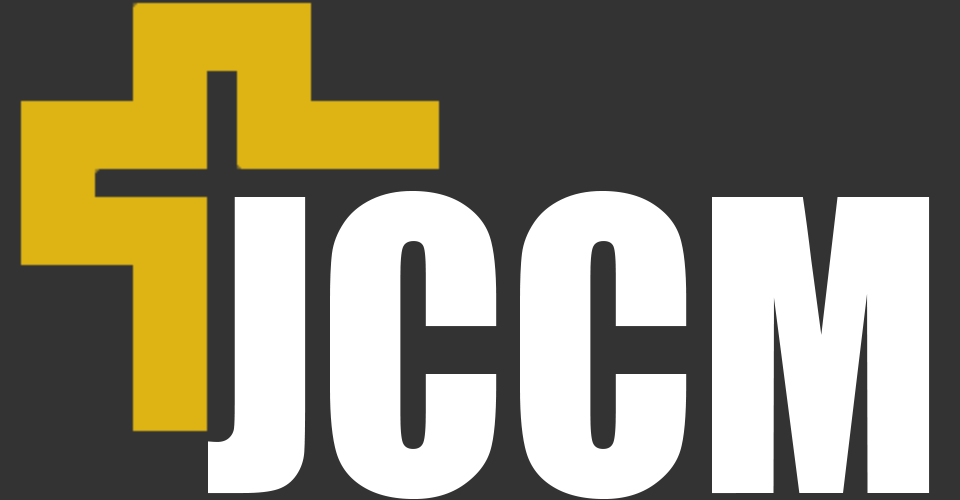
<style>
.page{position:relative;width:960px;height:500px;background:#333333}
.page>*{position:absolute;margin:0}
.t1{font:374.4px "Impact";color:#ffffff;scale:0.91 1}
</style>
<div class="page">
<p class="t1" style="left:208px;top:191px;width:722px;height:308px">JCCM</p>
</div>
